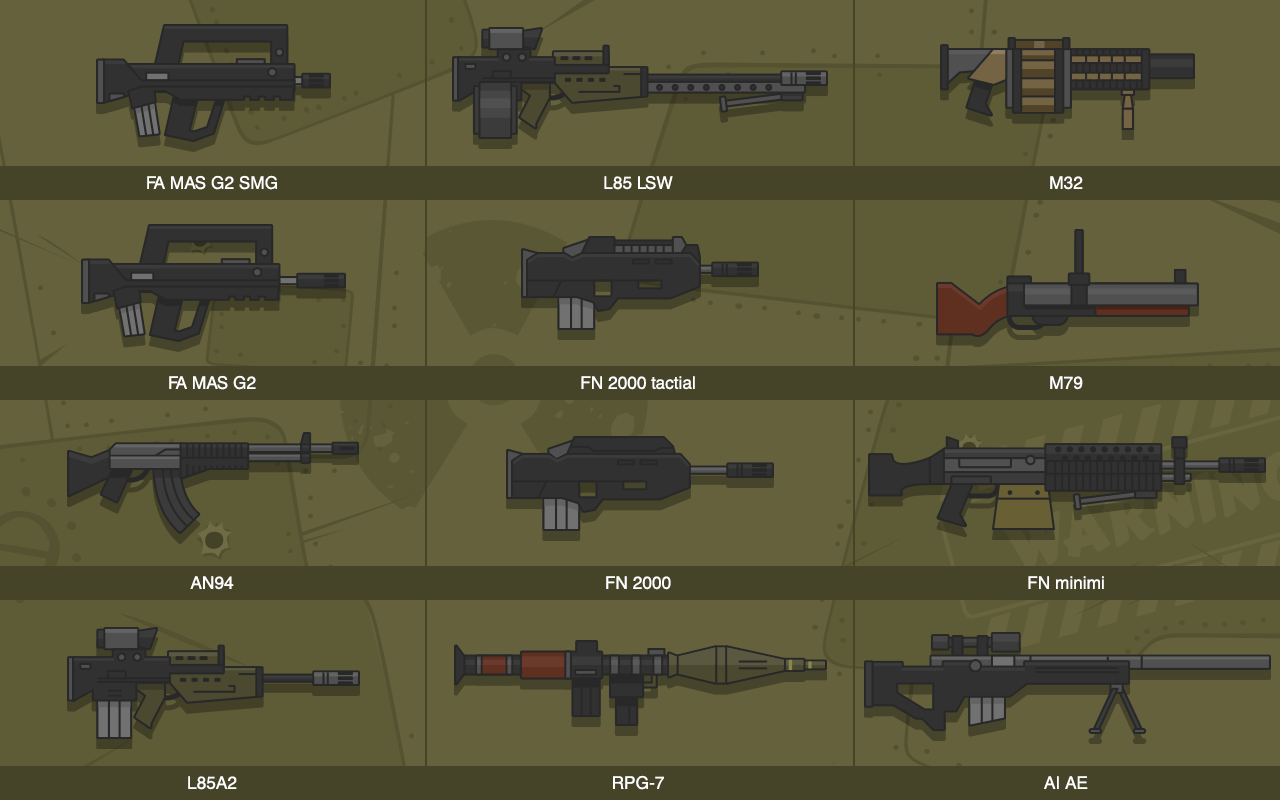
<style>
.page{position:relative;width:1280px;height:800px;background:#64613c}
.page>*{position:absolute;margin:0}
.t1{font:17.4px/200px "HelveticaCE-Regular";color:#ffffff}
</style>
<div class="page">
<p class="t1" style="left:147px;top:175px;width:130px;height:615px;text-align:center">FA MAS G2 SMG<br>FA MAS G2<br>AN94<br>L85A2</p>
<p class="t1" style="left:581px;top:175px;width:114px;height:615px;text-align:center">L85 LSW<br>FN 2000 tactial<br>FN 2000<br>RPG-7</p>
<p class="t1" style="left:1028px;top:176px;width:76px;height:613px;text-align:center">M32<br>M79<br>FN minimi<br>AI AE</p>
</div>
